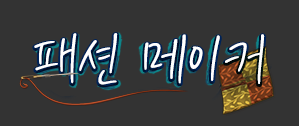
<style>
.page{position:relative;width:299px;height:126px;background:#333333}
.page>*{position:absolute;margin:0}
.t1{font:72px "KCC-eunyoung-Regular";color:#ffffff}
</style>
<div class="page">
<p class="t1" style="left:34px;top:33px;width:231px;height:52px">패션 메이커</p>
</div>
